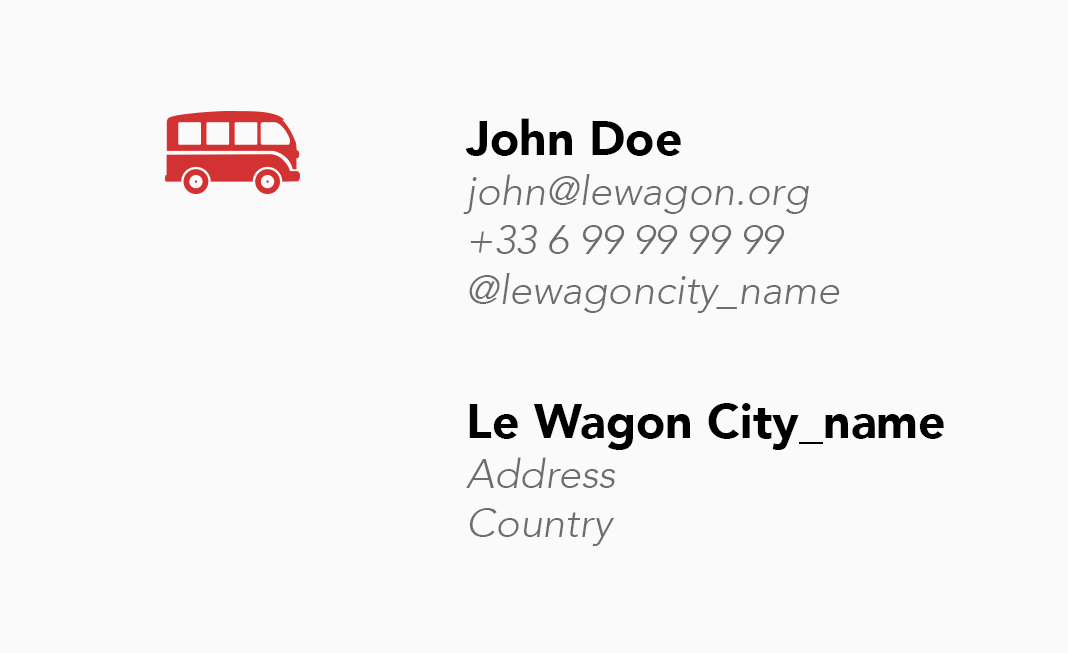
<style>
.page{position:relative;width:1068px;height:653px;background:#fafafa}
.page>*{position:absolute;margin:0}
.t1{font:41.2px "Avenir-LightOblique";color:#6d6d6d}
.t2{font:48.1px "Avenir-Black";color:#000000}
</style>
<div class="page">
<p class="t1" style="left:463px;top:118px;width:377px;height:195px"><span class="t2">John Doe<br></span>john@lewagon.org<br>+33 6 99 99 99 99 <br>@lewagoncity_name</p>
<p class="t2" style="left:466px;top:403px;width:478px;height:143px">Le Wagon City_name<br><span class="t1">Address<br>Country</span></p>
</div>
